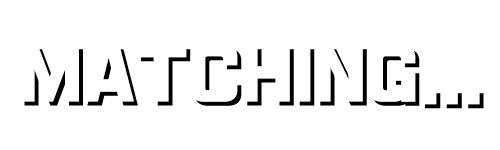
<style>
.page{position:relative;width:500px;height:150px;background:#ffffff}
.page>*{position:absolute;margin:0}
.t1{font:69.7px "Typo_SsangmunDong_B";color:#ffffff}
.t2{font:69.7px "Typo_SsangmunDong_B"}
</style>
<div class="page">
<p class="t1" style="left:20px;top:45px;width:460px;height:60px">MATCHING...</p>
<p class="t2" style="left:24px;top:49px;width:460px;height:60px">MATCHING...</p>
</div>
